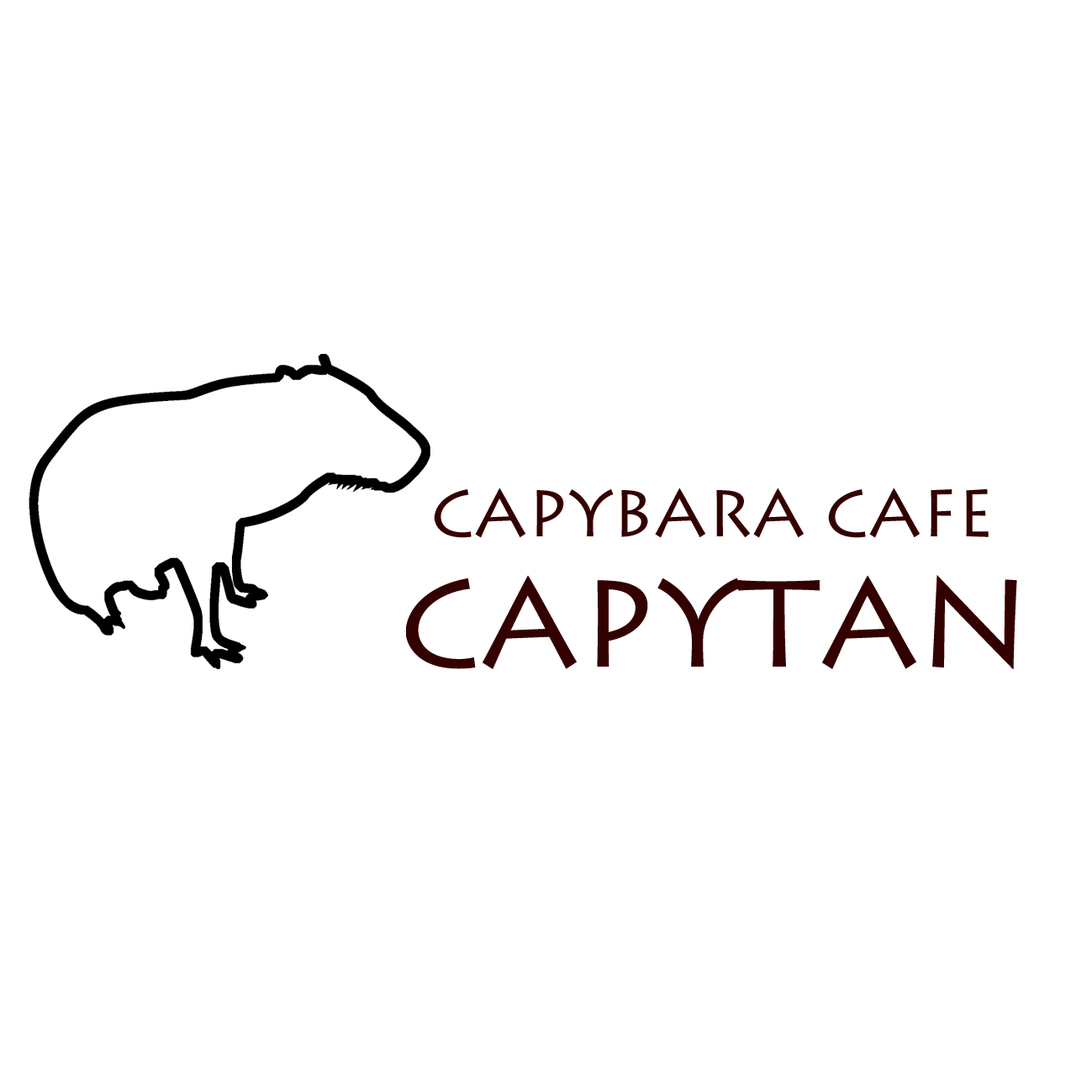
<style>
.page{position:relative;width:1092px;height:1092px;background:#ffffff}
.page>*{position:absolute;margin:0}
.t1{font:65.8px "LithosPro-Regular";color:#330000}
.t2{font:123.4px "LithosPro-Regular";color:#330000}
</style>
<div class="page">
<p class="t1" style="left:434px;top:488px;width:555px;height:50px">CAPYBARA CAFE</p>
<p class="t2" style="left:406px;top:575px;width:611px;height:94px">CAPYTAN</p>
</div>
